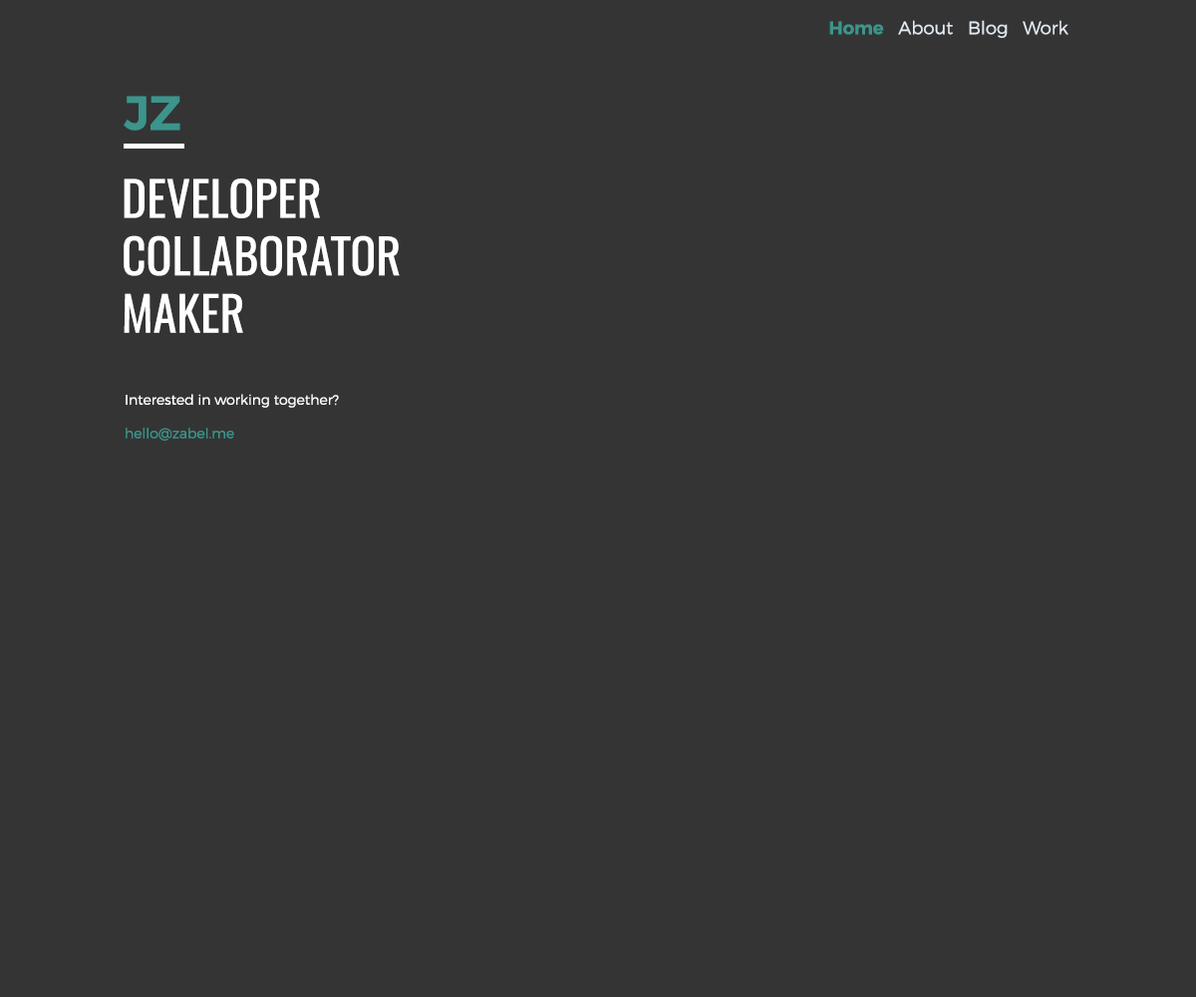
<style>
.page{position:relative;width:1196px;height:997px;background:#343434}
.page>*{position:absolute;margin:0}
.t1{font:17.9px "Montserrat-Light";color:#e1e8f0}
.t2{font:17.9px "Montserrat-SemiBold";color:#3c948b}
.t3{font:47.8px "Montserrat-SemiBold";color:#3c948b}
.t4{font:47.8px "Oswald-Regular";color:#ffffff}
.t5{font:14px "Montserrat-Light";color:#ffffff}
.t6{font:14px "Montserrat-Light";color:#3c948b}
</style>
<div class="page">
<p class="t1" style="left:829px;top:20px;width:240px;height:18px"><span class="t2">Home</span>   About   Blog   Work</p>
<p class="t3" style="left:124px;top:96px;width:56px;height:35px">JZ</p>
<p class="t4" style="left:124px;top:178px;width:276px;height:155px">DEVELOPER<br>COLLABORATOR<br>MAKER</p>
<p class="t5" style="left:126px;top:394px;width:213px;height:47px">Interested in working together?<br><br><span class="t6">hello@zabel.me</span></p>
</div>
